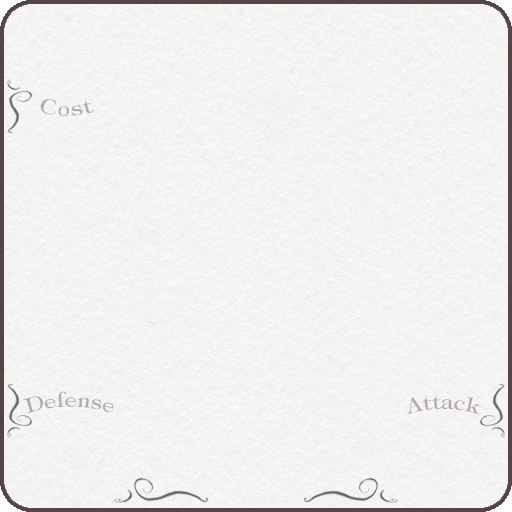
<style>
.page{position:relative;width:512px;height:512px}
.page>*{position:absolute;margin:0}
.t1{font:20px "Tipographytimes-Regular";letter-spacing:0.025em;color:#b0abaa}
</style>
<div class="page">
<p class="t1" style="left:40px;top:98px;width:54px;height:19px">Cost</p>
<p class="t1" style="left:22px;top:391px;width:92px;height:23px">Defense</p>
<p class="t1" style="left:407px;top:394px;width:75px;height:21px">Attack</p>
</div>
